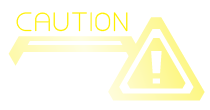
<style>
.page{position:relative;width:210px;height:110px;background:#ffffff}
.page>*{position:absolute;margin:0}
.t1{font:22px "Steiner";letter-spacing:0.12em;color:#fff000}
</style>
<div class="page">
<p class="t1" style="left:16px;top:12px;width:112px;height:20px">CAUTION</p>
</div>
